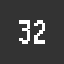
<style>
.page{position:relative;width:64px;height:64px;background:#333333}
.page>*{position:absolute;margin:0}
.t1{font:40.9px "Glasstown-NBP";letter-spacing:0.005em;color:#ffffff;font-weight:bold}
</style>
<div class="page">
<p class="t1" style="left:19px;top:20px;width:26px;height:24px">32</p>
</div>
